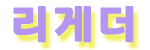
<style>
.page{position:relative;width:150px;height:50px;background:#ffffff}
.page>*{position:absolute;margin:0}
.t1{font:43.1px "GyeonggiTitleBOTF";letter-spacing:0.12em;color:#b495ef;font-weight:bold}
</style>
<div class="page">
<p class="t1" style="left:13px;top:6px;width:121px;height:37px">리게더</p>
</div>
